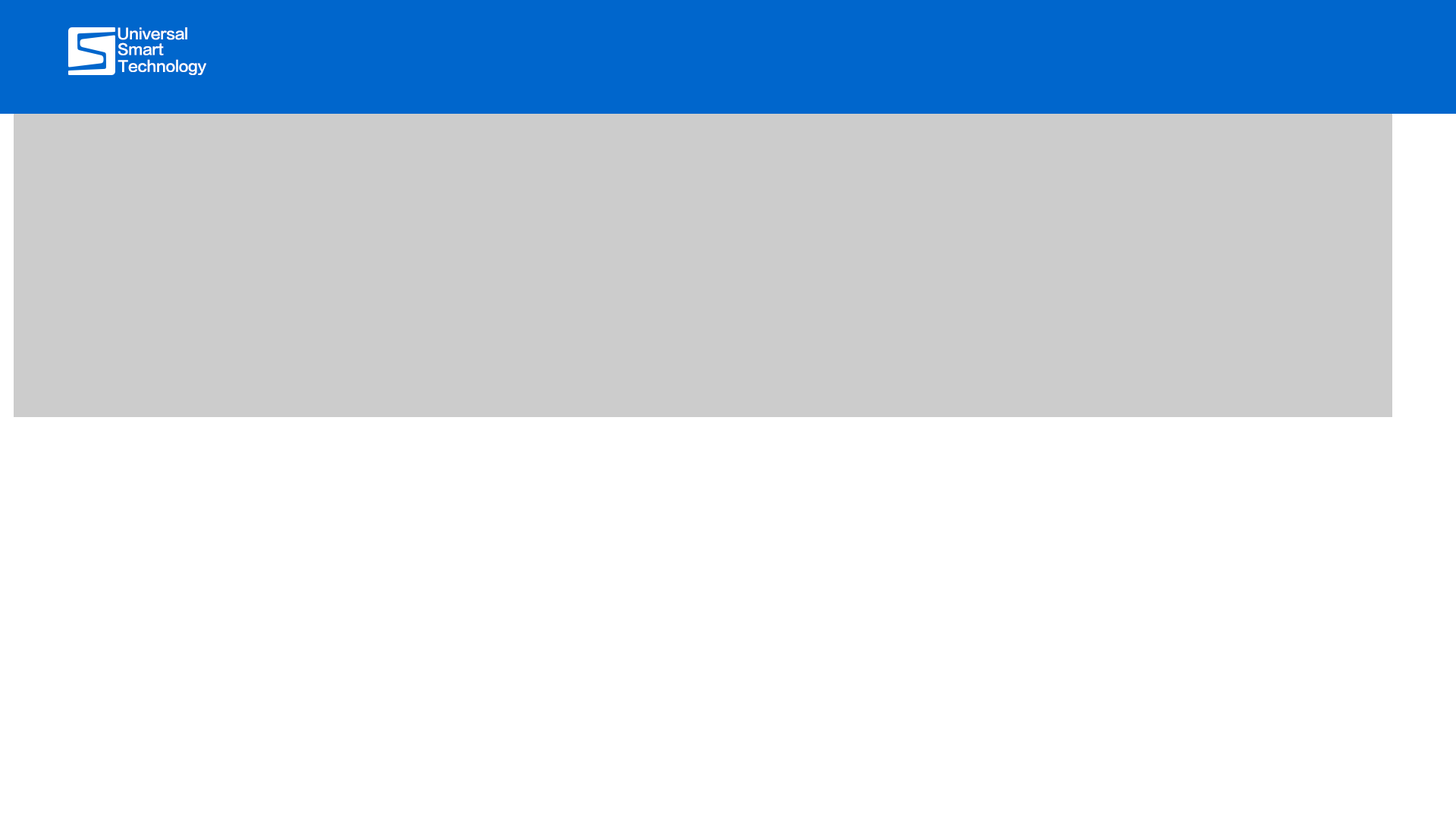
<style>
.page{position:relative;width:1456px;height:819px;background:#ffffff}
.page>*{position:absolute;margin:0}
.t1{font:14.6px "FZLTZHK--GBK1-0";letter-spacing:-0.01em;color:#ffffff}
</style>
<div class="page">
<p class="t1" style="left:118px;top:27px;width:69px;height:13px">Universal</p>
<p class="t1" style="left:118px;top:42px;width:46px;height:13px">Smart</p>
<p class="t1" style="left:118px;top:59px;width:88px;height:16px">Technology</p>
</div>
